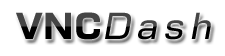
<style>
.page{position:relative;width:225px;height:56px;background:#ffffff}
.page>*{position:absolute;margin:0}
.t1{font:36px "Moire";letter-spacing:0.16em;font-style:italic}
.t2{font:36px "Moire-Bold"}
</style>
<div class="page">
<p class="t1" style="left:16px;top:12px;width:195px;height:28px"><span class="t2">VNC</span>Dash</p>
</div>
